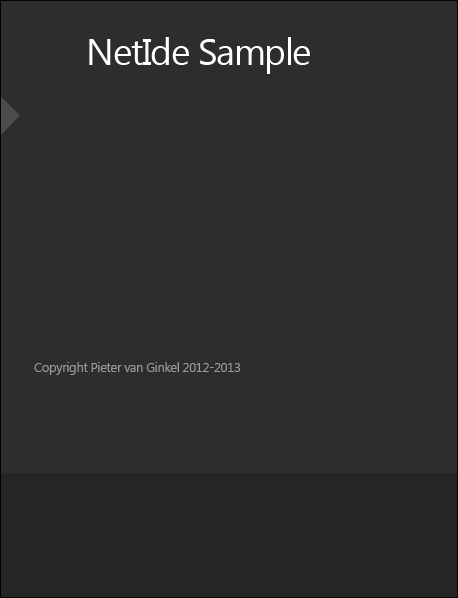
<style>
.page{position:relative;width:458px;height:598px;background:#2d2d30}
.page>*{position:absolute;margin:0}
.t1{font:37.3px "SegoeUI";letter-spacing:-0.04em;color:#ffffff}
.t2{font:13.3px "SegoeUI";letter-spacing:-0.04em;color:#999999}
</style>
<div class="page">
<p class="t1" style="left:89px;top:37px;width:221px;height:37px">NetIde Sample</p>
<p class="t2" style="left:34px;top:362px;width:207px;height:13px">Copyright Pieter van Ginkel 2012-2013</p>
</div>
